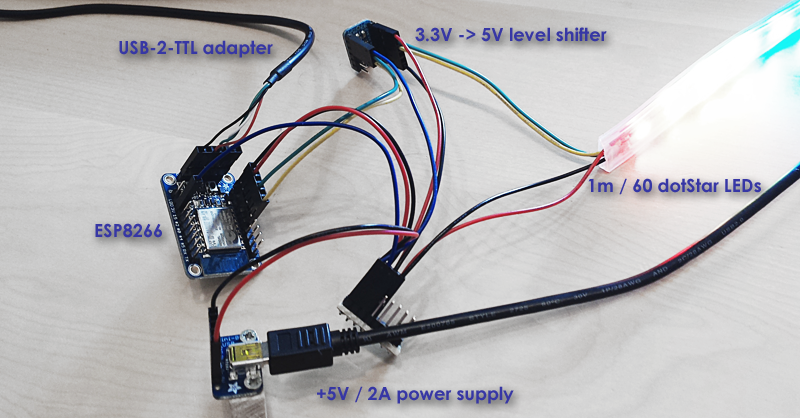
<style>
.page{position:relative;width:800px;height:418px}
.page>*{position:absolute;margin:0}
.t1{font:18px "CenturyGothic-Bold";color:#3737a5}
</style>
<div class="page">
<p class="t1" style="left:415px;top:27px;width:192px;height:15px">3.3V -&gt; 5V level shifter</p>
<p class="t1" style="left:119px;top:40px;width:154px;height:18px">USB-2-TTL adapter</p>
<p class="t1" style="left:588px;top:178px;width:173px;height:17px">1m / 60 dotStar LEDs</p>
<p class="t1" style="left:95px;top:223px;width:67px;height:15px">ESP8266</p>
<p class="t1" style="left:317px;top:386px;width:197px;height:18px">+5V / 2A power supply</p>
</div>
